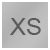
<style>
.page{position:relative;width:50px;height:50px}
.page>*{position:absolute;margin:0}
.t1{font:24px "ArialMT";color:#5a5a5a}
</style>
<div class="page">
<p class="t1" style="left:10px;top:18px;width:31px;height:17px">XS</p>
</div>
